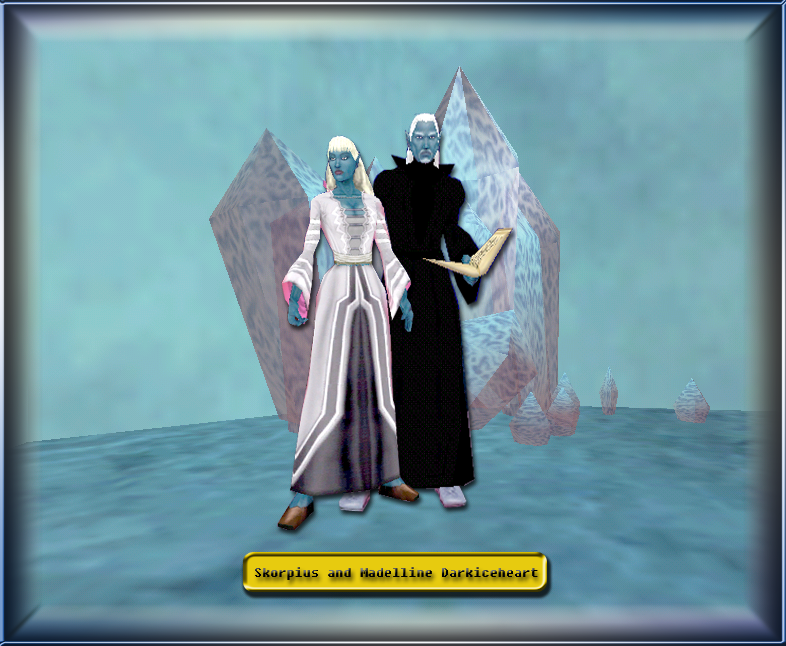
<style>
.page{position:relative;width:786px;height:646px}
.page>*{position:absolute;margin:0}
.t1{font:13px "Fixedsys"}
</style>
<div class="page">
<p class="t1" style="left:255px;top:567px;width:283px;height:13px">Skorpius and Madelline Darkiceheart</p>
</div>
